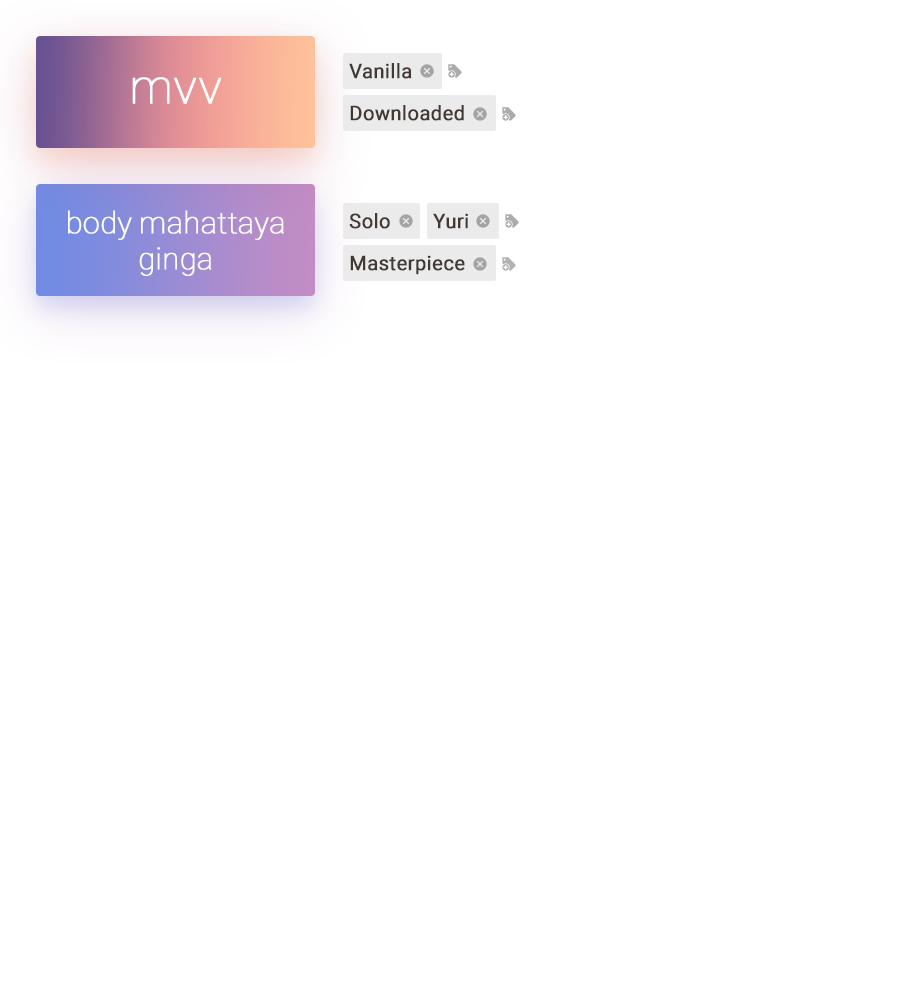
<style>
.page{position:relative;width:910px;height:1000px;background:#ffffff}
.page>*{position:absolute;margin:0}
.t1{font:20px "Roboto-Regular";color:#423934;font-weight:bold}
.t2{font:48px "Roboto-Thin";color:#ffffff;font-weight:bold}
.t3{font:30px "Roboto-Thin";color:#ffffff;font-weight:bold}
</style>
<div class="page">
<p class="t1" style="left:349px;top:63px;width:63px;height:16px">Vanilla</p>
<p class="t2" style="left:132px;top:77px;width:90px;height:27px">mvv</p>
<p class="t1" style="left:350px;top:105px;width:114px;height:16px">Downloaded</p>
<p class="t3" style="left:68px;top:210px;width:216px;height:66px;text-align:center">body mahattaya ginga</p>
<p class="t1" style="left:349px;top:213px;width:41px;height:16px">Solo</p>
<p class="t1" style="left:433px;top:213px;width:35px;height:16px">Yuri</p>
<p class="t1" style="left:350px;top:255px;width:115px;height:20px">Masterpiece</p>
</div>
